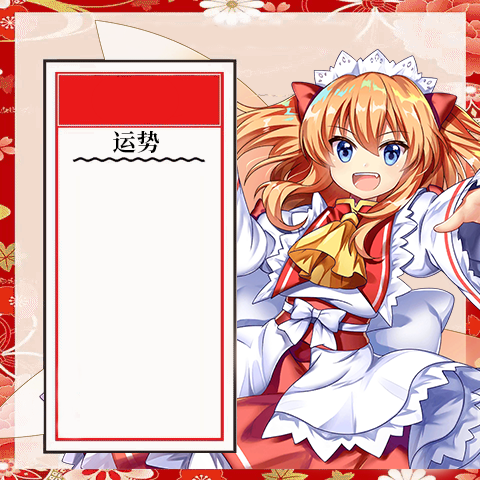
<style>
.page{position:relative;width:480px;height:480px;background:#fcfaf9}
.page>*{position:absolute;margin:0}
.t1{font:24px "NotoSerifSC-Bold";color:#000000}
</style>
<div class="page">
<p class="t1" style="left:113px;top:130px;width:46px;height:23px">运势</p>
</div>
